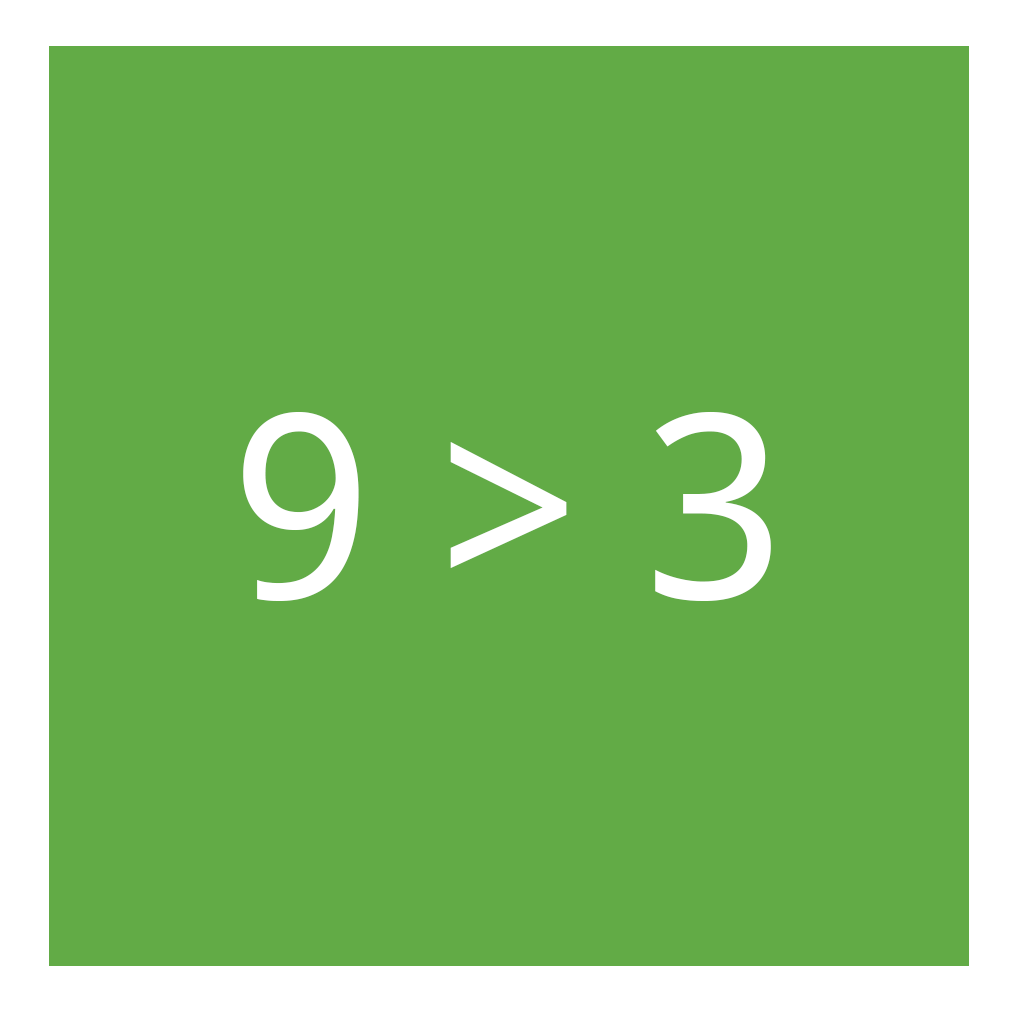
<style>
.page{position:relative;width:1024px;height:1024px;background:#62ab46}
.page>*{position:absolute;margin:0}
.t1{font:256px "DroidSans";color:#ffffff}
</style>
<div class="page">
<p class="t1" style="left:243px;top:411px;width:528px;height:190px">9 &gt; 3</p>
</div>
